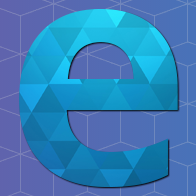
<style>
.page{position:relative;width:196px;height:196px}
.page>*{position:absolute;margin:0}
.t1{font:315px "OpenSans-Bold"}
</style>
<div class="page">
<p class="t1" style="left:19px;top:8px;width:159px;height:179px">e</p>
</div>
